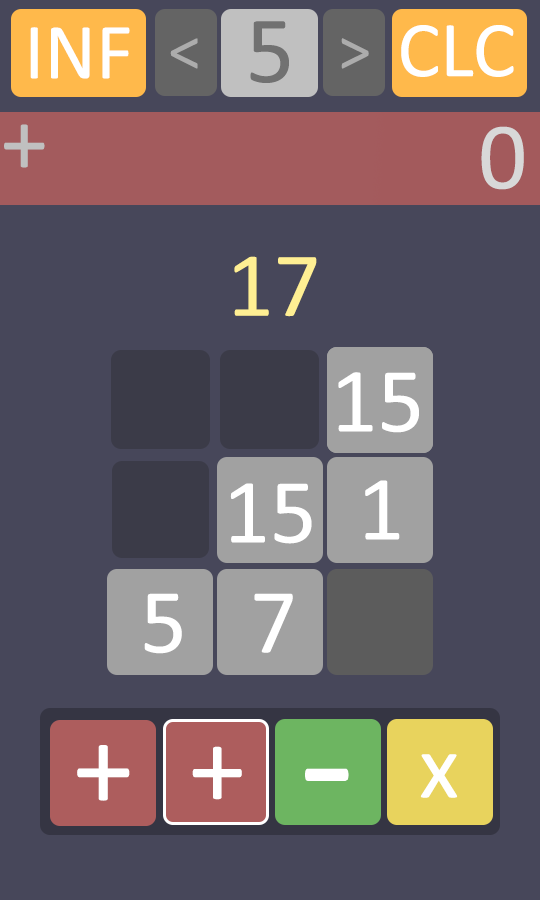
<style>
.page{position:relative;width:540px;height:900px;background:#47475a}
.page>*{position:absolute;margin:0}
.t1{font:80px "Calibri";color:#ffffff}
.t2{font:96px "Calibri";color:#717171}
.t3{font:64px "Calibri";color:#c0c0c0}
.t4{font:93.5px "Calibri";color:#c0c0c0}
.t5{font:96px "Calibri";color:#d8d8d8}
.t6{font:92.5px "Calibri";color:#ffef93}
.t7{font:92.5px "Calibri";color:#ffffff}
.t8{font:121.2px "Calibri";color:#ffffff}
.t9{font:114.2px "Calibri";color:#ffffff}
.t10{font:92.2px "Calibri";color:#ffffff}
.t11{font:180.9px "Calibri";color:#ffffff}
</style>
<div class="page">
<p class="t1" style="left:30px;top:27px;width:100px;height:52px">INF</p>
<p class="t2" style="left:250px;top:21px;width:39px;height:62px">5</p>
<p class="t1" style="left:401px;top:25px;width:113px;height:52px">CLC</p>
<p class="t3" style="left:170px;top:38px;width:28px;height:31px;opacity:0.75">&lt;</p>
<p class="t3" style="left:341px;top:38px;width:28px;height:31px;opacity:0.75">&gt;</p>
<p class="t4" style="left:4px;top:124px;width:41px;height:44px">+</p>
<p class="t5" style="left:481px;top:126px;width:43px;height:64px">0</p>
<p class="t6" style="left:234px;top:256px;width:83px;height:61px">17</p>
<p class="t7" style="left:338px;top:372px;width:81px;height:61px">15</p>
<p class="t7" style="left:230px;top:483px;width:82px;height:61px">15</p>
<p class="t7" style="left:365px;top:480px;width:35px;height:60px">1</p>
<p class="t7" style="left:144px;top:593px;width:38px;height:61px">5</p>
<p class="t7" style="left:254px;top:593px;width:39px;height:60px">7</p>
<p class="t8" style="left:77px;top:745px;width:53px;height:56px">+</p>
<p class="t9" style="left:192px;top:746px;width:50px;height:54px">+</p>
<p class="t10" style="left:420px;top:754px;width:38px;height:44px">x</p>
<p class="t11" style="left:305px;top:768px;width:44px;height:13px">-</p>
</div>
